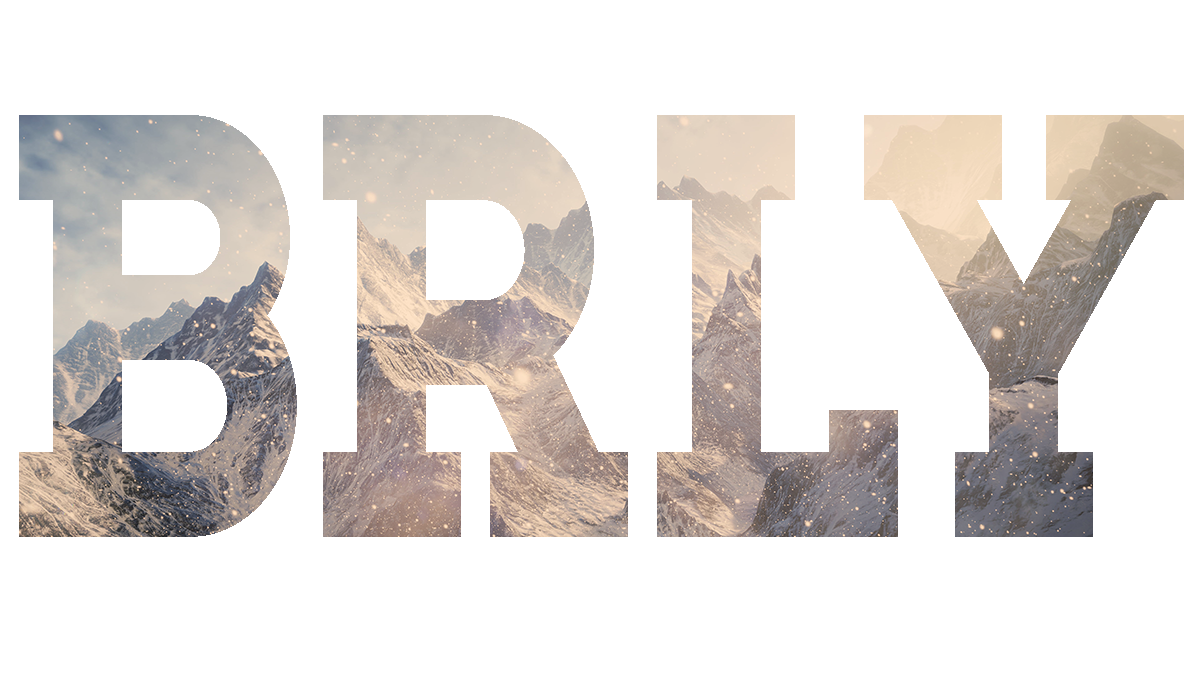
<style>
.page{position:relative;width:1200px;height:673px;background:#ffffff}
.page>*{position:absolute;margin:0}
.t1{font:601.5px "Homestead-Regular";scale:0.81 1}
</style>
<div class="page">
<p class="t1" style="left:19px;top:115px;width:1165px;height:422px">BRLY</p>
</div>
